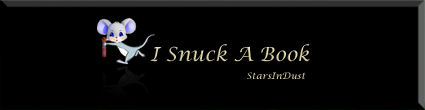
<style>
.page{position:relative;width:425px;height:110px;background:#000000}
.page>*{position:absolute;margin:0}
.t1{font:19.5px "LucidaCalligraphy-Italic";color:#e1d8a9}
.t2{font:9.1px "LucidaCalligraphy-Italic";color:#e1d8a9}
</style>
<div class="page">
<p class="t1" style="left:150px;top:44px;width:160px;height:18px">I Snuck A Book</p>
<p class="t2" style="left:247px;top:72px;width:59px;height:7px">StarsInDust</p>
</div>
